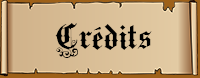
<style>
.page{position:relative;width:200px;height:78px}
.page>*{position:absolute;margin:0}
.t1{font:36.2px "MediciText";color:#000000}
</style>
<div class="page">
<p class="t1" style="left:55px;top:23px;width:97px;height:35px">Crédits</p>
</div>
